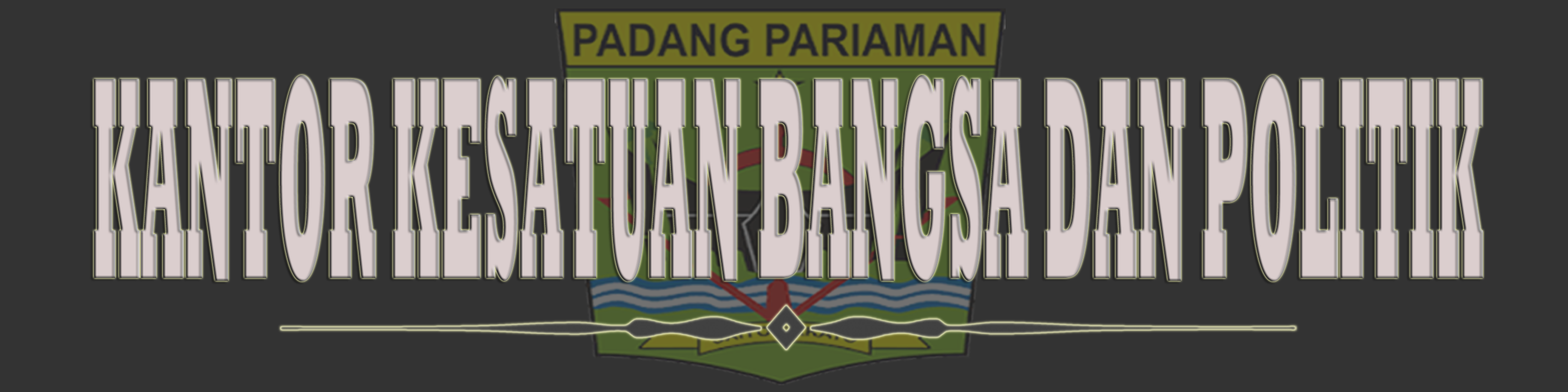
<style>
.page{position:relative;width:1568px;height:392px;background:#333333}
.page>*{position:absolute;margin:0}
.t1{font:293.3px "Rockwell-ExtraBold";scale:0.2 1}
</style>
<div class="page">
<p class="t1" style="left:93px;top:75px;width:1390px;height:206px">KANTOR KESATUAN BANGSA DAN POLITIK</p>
</div>
